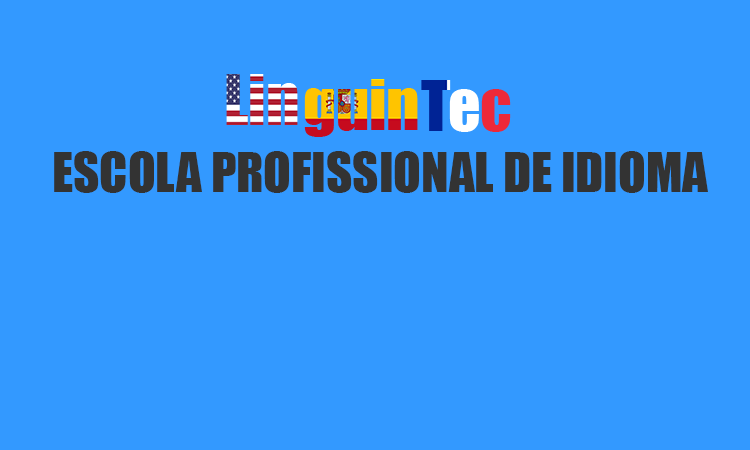
<style>
.page{position:relative;width:750px;height:450px;background:#3399ff}
.page>*{position:absolute;margin:0}
.t1{font:50.8px "Impact";color:#333333}
</style>
<div class="page">
<p class="t1" style="left:54px;top:151px;width:654px;height:42px">ESCOLA PROFISSIONAL DE IDIOMA</p>
</div>
